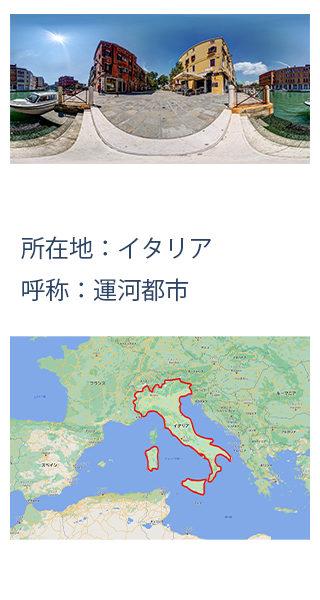
<style>
.page{position:relative;width:320px;height:600px;background:#ffffff}
.page>*{position:absolute;margin:0}
.t1{font:24px "KozGoPr6N-Regular";color:#2c4566}
</style>
<div class="page">
<p class="t1" style="left:21px;top:236px;width:190px;height:66px">所在地：イタリア<br>呼称：運河都市</p>
</div>
